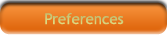
<style>
.page{position:relative;width:167px;height:37px}
.page>*{position:absolute;margin:0}
.t1{font:15px "TrebuchetMS";color:#cecb79}
</style>
<div class="page">
<p class="t1" style="left:45px;top:12px;width:79px;height:13px">Preferences</p>
</div>
